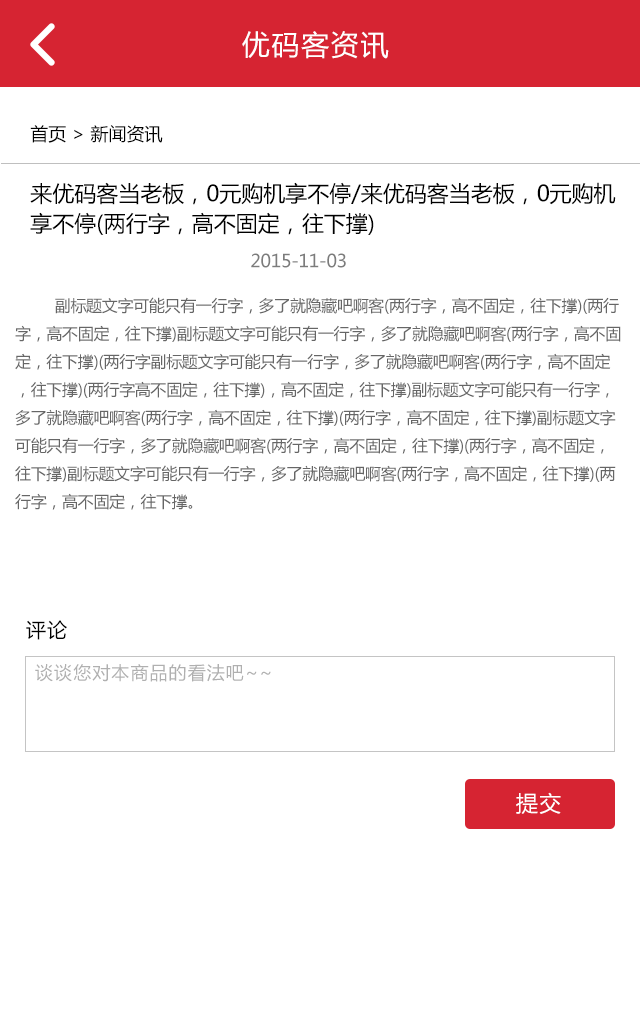
<style>
.page{position:relative;width:640px;height:1035px;background:#ffffff}
.page>*{position:absolute;margin:0}
.t1{font:28px "MicrosoftYaHei";letter-spacing:0.06em;color:#ffffff}
.t2{font:18px "MicrosoftYaHei";color:#000000}
.t3{font:22px/30px "MicrosoftYaHei";color:#000000}
.t4{font:18px "MicrosoftYaHei";letter-spacing:-0.02em;color:#7d7d7d}
.t5{font:16px/28px "MicrosoftYaHei";letter-spacing:-0.02em;color:#666666}
.t6{font:20px "MicrosoftYaHei";letter-spacing:0.06em;color:#000000}
.t7{font:18px "MicrosoftYaHei";letter-spacing:0.06em;color:#b0b0b0}
.t8{font:22px "MicrosoftYaHei";letter-spacing:0.06em;color:#ffffff}
</style>
<div class="page">
<p class="t1" style="left:242px;top:31px;width:147px;height:28px">优码客资讯</p>
<p class="t2" style="left:30px;top:125px;width:133px;height:18px">首页 &gt; 新闻资讯</p>
<p class="t3" style="left:30px;top:182px;width:586px;height:53px">来优码客当老板，0元购机享不停/来优码客当老板，0元购机<br>享不停(两行字，高不固定，往下撑)</p>
<p class="t4" style="left:251px;top:253px;width:95px;height:15px">2015-11-03</p>
<p class="t5" style="left:15px;top:297px;width:606px;height:213px">副标题文字可能只有一行字，多了就隐藏吧啊客(两行字，高不固定，往下撑)(两行字，高不固定，往下撑)副标题文字可能只有一行字，多了就隐藏吧啊客(两行字，高不固定，往下撑)(两行字副标题文字可能只有一行字，多了就隐藏吧啊客(两行字，高不固定，往下撑)(两行字高不固定，往下撑)，高不固定，往下撑)副标题文字可能只有一行字，多了就隐藏吧啊客(两行字，高不固定，往下撑)(两行字，高不固定，往下撑)副标题文字可能只有一行字，多了就隐藏吧啊客(两行字，高不固定，往下撑)(两行字，高不固定，往下撑)副标题文字可能只有一行字，多了就隐藏吧啊客(两行字，高不固定，往下撑)(两行字，高不固定，往下撑。</p>
<p class="t6" style="left:26px;top:620px;width:41px;height:20px">评论</p>
<p class="t7" style="left:35px;top:664px;width:236px;height:18px">谈谈您对本商品的看法吧~~</p>
<p class="t8" style="left:516px;top:792px;width:45px;height:22px">提交</p>
</div>
